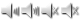
<style>
.page{position:relative;width:80px;height:20px;background:#ffffff}
.page>*{position:absolute;margin:0}
.t1{font:10px "Verdana"}
</style>
<div class="page">
<p class="t1" style="left:51px;top:6px;width:7px;height:8px">X</p>
</div>
